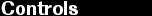
<style>
.page{position:relative;width:152px;height:16px;background:#000000}
.page>*{position:absolute;margin:0}
.t1{font:17.2px "FolkPro-Heavy";color:#ffffff}
</style>
<div class="page">
<p class="t1" style="left:1px;top:1px;width:77px;height:14px">Controls</p>
</div>
